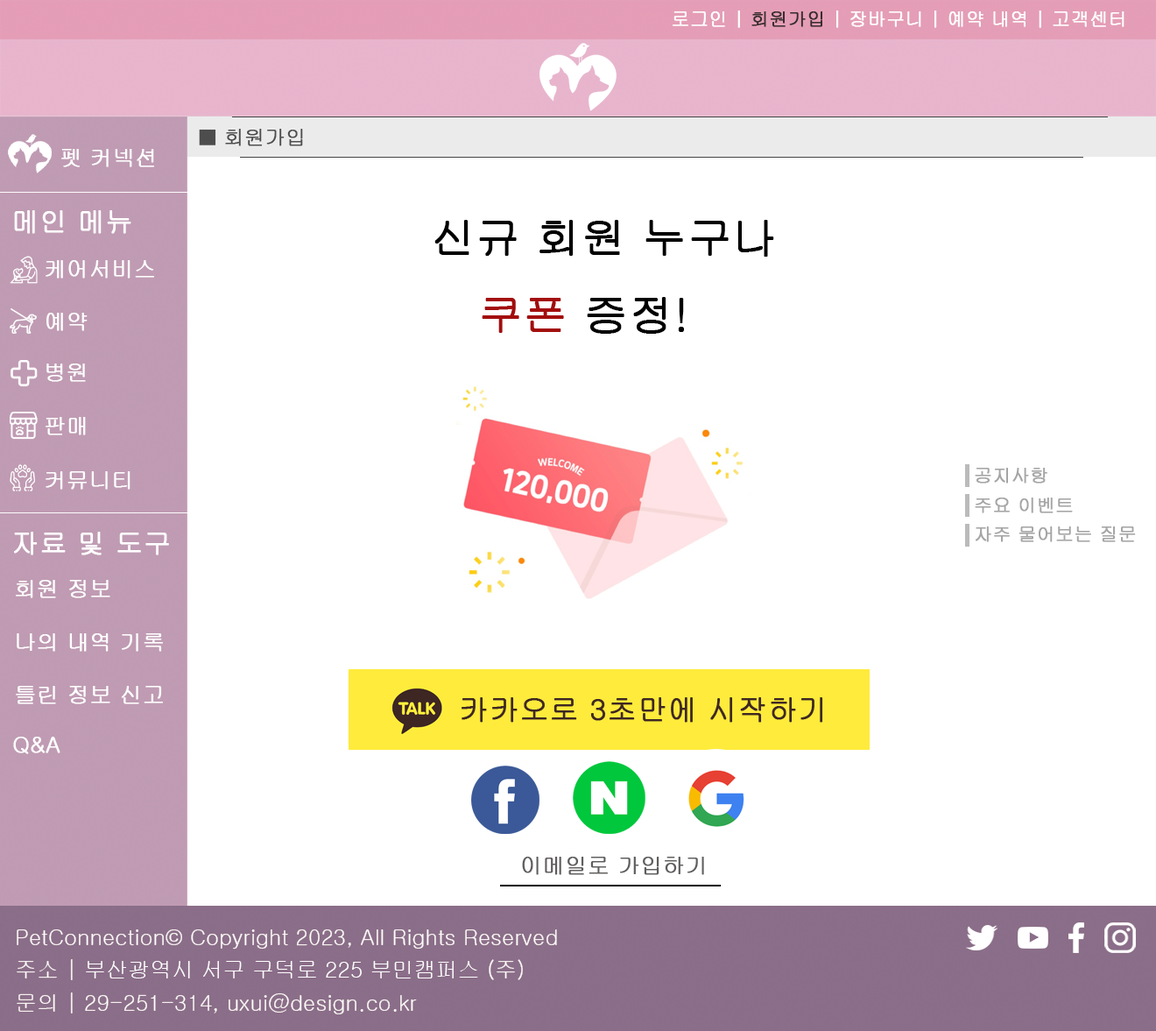
<style>
.page{position:relative;width:1156px;height:1031px;background:#ffffff}
.page>*{position:absolute;margin:0}
.t1{font:18.4px "Gulim";color:#ffffff;font-weight:bold}
.t2{font:18.4px "Gulim";color:#382d2d;font-weight:bold}
.t3{font:20.1px "Gulim";color:#4d4d4d;font-weight:bold}
.t4{font:21.9px "Gulim";color:#ffffff;font-weight:bold}
.t5{font:27.4px "Gulim";color:#ffffff;font-weight:bold}
.t6{font:43.8px "Gulim";color:#000000;font-weight:bold}
.t7{font:43.8px "Gulim";color:#a30d0d;font-weight:bold}
.t8{font:18.3px "Gulim";color:#a5a5a5;font-weight:bold}
.t9{font:29.2px "Gulim";color:#3e2723;font-weight:bold}
.t10{font:21.9px "Gulim";color:#5f5d5c;font-weight:bold}
.t11{font:21.9px/32.9px "Gulim";color:#ffffff}
</style>
<div class="page">
<p class="t1" style="left:673px;top:11px;width:452px;height:17px">로그인 | <span class="t2">회원가입 </span>| 장바구니 | 예약 내역 | 고객센터</p>
<p class="t3" style="left:199px;top:129px;width:104px;height:17px">■ 회원가입</p>
<p class="t4" style="left:61px;top:149px;width:93px;height:18px">펫 커넥션</p>
<p class="t5" style="left:14px;top:210px;width:117px;height:24px">메인 메뉴</p>
<p class="t6" style="left:435px;top:220px;width:339px;height:114px">신규 회원 누구나<br>   <span class="t7">쿠폰</span> 증정!</p>
<p class="t4" style="left:46px;top:260px;width:108px;height:19px">케어서비스</p>
<p class="t4" style="left:46px;top:313px;width:42px;height:18px">예약</p>
<p class="t4" style="left:46px;top:364px;width:40px;height:18px">병원</p>
<p class="t4" style="left:46px;top:417px;width:40px;height:18px">판매</p>
<p class="t4" style="left:46px;top:471px;width:85px;height:19px">커뮤니티</p>
<p class="t8" style="left:975px;top:468px;width:73px;height:16px">공지사항</p>
<p class="t8" style="left:975px;top:498px;width:98px;height:15px">주요 이벤트</p>
<p class="t5" style="left:14px;top:532px;width:155px;height:23px">자료 및 도구</p>
<p class="t8" style="left:976px;top:527px;width:160px;height:15px">자주 물어보는 질문</p>
<p class="t4" style="left:16px;top:580px;width:94px;height:18px">회원 정보</p>
<p class="t4" style="left:17px;top:633px;width:146px;height:19px">나의 내역 기록</p>
<p class="t4" style="left:16px;top:686px;width:147px;height:18px">틀린 정보 신고</p>
<p class="t9" style="left:462px;top:697px;width:362px;height:26px">카카오로 3초만에 시작하기</p>
<p class="t4" style="left:13px;top:737px;width:47px;height:17px">Q&amp;A</p>
<p class="t10" style="left:522px;top:857px;width:182px;height:18px">이메일로 가입하기</p>
<p class="t11" style="left:17px;top:930px;width:540px;height:84px">PetConnection© Copyright 2023, All Rights Reserved<br>주소 | 부산광역시 서구 구덕로 225 부민캠퍼스 (주)<br>문의 | 29-251-314, uxui@design.co.kr</p>
</div>
